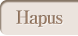
<style>
.page{position:relative;width:78px;height:36px;background:#ebe3dd}
.page>*{position:absolute;margin:0}
.t1{font:18px "RyuminPro-ExBold";letter-spacing:-0.08em;color:#977b66}
</style>
<div class="page">
<p class="t1" style="left:16px;top:10px;width:47px;height:17px">Hapus</p>
</div>
